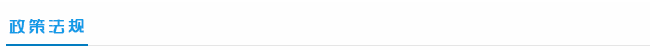
<style>
.page{position:relative;width:650px;height:50px;background:#fefefe}
.page>*{position:absolute;margin:0}
.t1{font:16px "TRENDS";letter-spacing:0.2em;color:#139be7;font-weight:bold}
</style>
<div class="page">
<p class="t1" style="left:9px;top:19px;width:75px;height:15px">政策法规</p>
</div>
